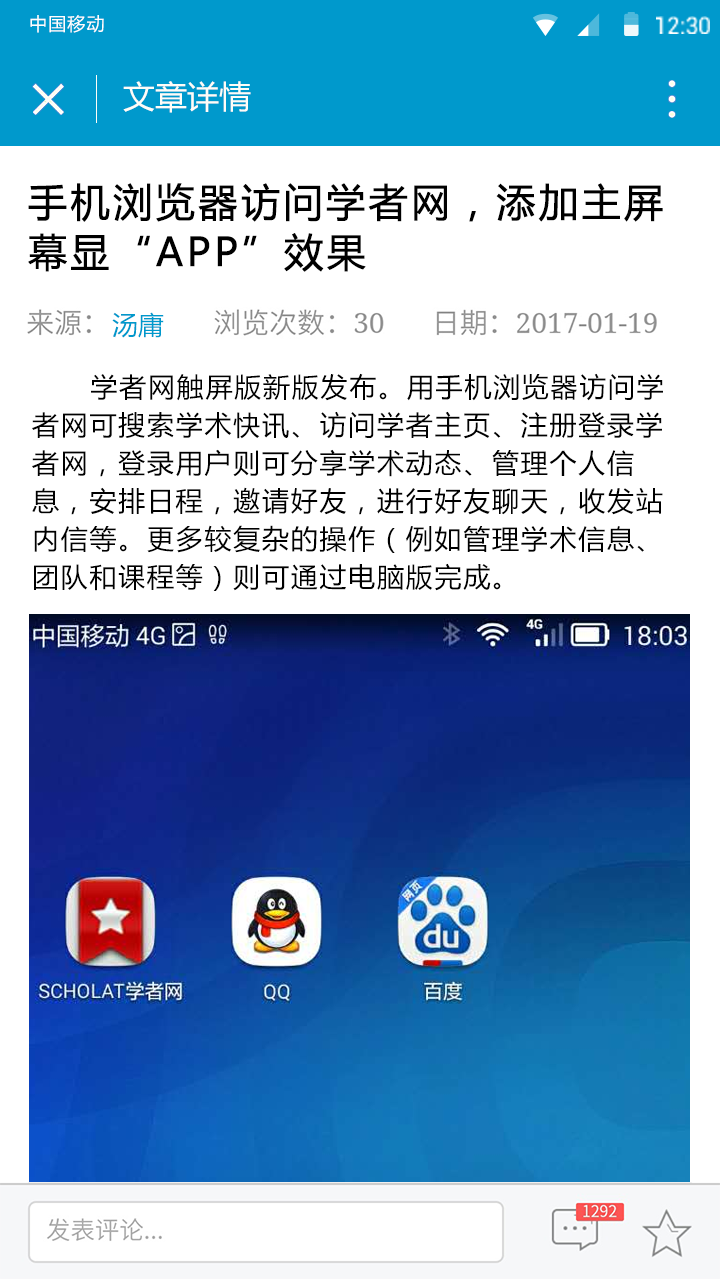
<style>
.page{position:relative;width:720px;height:1280px;background:#ffffff}
.page>*{position:absolute;margin:0}
.t1{font:17.9px "MicrosoftYaHei";letter-spacing:0.065em;color:#ffffff}
.t2{font:32px "MicrosoftYaHei";color:#fefdf8}
.t3{font:39px/50px "MicrosoftYaHei";letter-spacing:0.065em;color:#000000;font-weight:bold}
.t4{font:26px "MicrosoftYaHei";color:#0099cc}
.t5{font:27px/38px "MicrosoftYaHei";letter-spacing:0.065em;color:#000000}
</style>
<div class="page">
<p class="t1" style="left:30px;top:15px;width:74px;height:18px">中国移动</p>
<p class="t2" style="left:123px;top:81px;width:128px;height:32px">文章详情</p>
<p class="t3" style="left:28px;top:183px;width:635px;height:89px">手机浏览器访问学者网，添加主屏<br>幕显“APP”效果</p>
<p class="t4" style="left:112px;top:312px;width:52px;height:26px">汤庸</p>
<p class="t5" style="left:32px;top:373px;width:631px;height:218px">学者网触屏版新版发布。用手机浏览器访问学者网可搜索学术快讯、访问学者主页、注册登录学者网，登录用户则可分享学术动态、管理个人信息，安排日程，邀请好友，进行好友聊天，收发站内信等。更多较复杂的操作（例如管理学术信息、团队和课程等）则可通过电脑版完成。</p>
</div>
